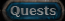
<style>
.page{position:relative;width:65px;height:21px}
.page>*{position:absolute;margin:0}
.t1{font:13.9px "BritannicBold";color:#787a7b;scale:1.12 1}
</style>
<div class="page">
<p class="t1" style="left:10px;top:6px;width:47px;height:11px">Quests</p>
</div>
